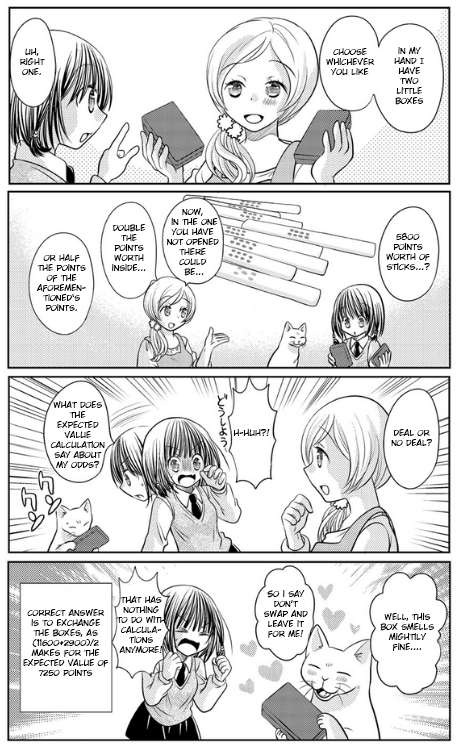
<style>
.page{position:relative;width:459px;height:749px;background:#ffffff}
.page>*{position:absolute;margin:0}
.t1{font:8.3px "WildWordsRoman";color:#000000}
</style>
<div class="page">
<p class="t1" style="left:19px;top:48px;width:26px;height:27px;text-align:center">uh, right one.</p>
<p class="t1" style="left:326px;top:48px;width:49px;height:27px;text-align:center">choose whichever you like</p>
<p class="t1" style="left:394px;top:47px;width:31px;height:58px;text-align:center">in my hand I have two little boxes</p>
<p class="t1" style="left:167px;top:208px;width:52px;height:68px;text-align:center">now,<br> in the one you have not opened there could<br> be...</p>
<p class="t1" style="left:112px;top:224px;width:34px;height:47px;text-align:center">double the points worth inside...</p>
<p class="t1" style="left:386px;top:233px;width:44px;height:37px;text-align:center">5800 points worth of sticks...?</p>
<p class="t1" style="left:37px;top:254px;width:49px;height:57px;text-align:center">or half the points of the aforementioned‘s points.</p>
<p class="t1" style="left:50px;top:401px;width:55px;height:67px;text-align:center">what does the expected value calculation say about my odds?</p>
<p class="t1" style="left:233px;top:429px;width:37px;height:7px">h-huh?!</p>
<p class="t1" style="left:391px;top:429px;width:41px;height:17px;text-align:center">deal or no deal?</p>
<p class="t1" style="left:264px;top:590px;width:44px;height:48px;text-align:center">So i say don’t swap and leave it for me!</p>
<p class="t1" style="left:116px;top:596px;width:50px;height:57px;text-align:center">that has nothing <br>to do with calculations anymore!</p>
<p class="t1" style="left:23px;top:609px;width:86px;height:67px;text-align:center">correct answer is to exchange the boxes, as (11600+2900)/2 makes for the expected value of 7250 points</p>
<p class="t1" style="left:380px;top:613px;width:54px;height:38px;text-align:center">well, this box smells mightily fine....</p>
</div>
